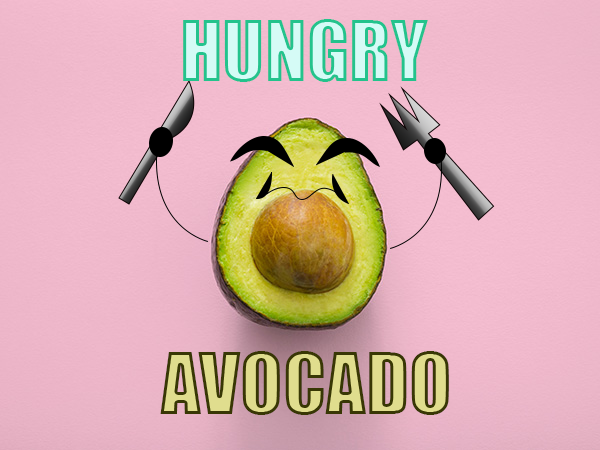
<style>
.page{position:relative;width:600px;height:450px}
.page>*{position:absolute;margin:0}
.t1{font:77.3px "Impact"}
.t2{font:78.1px "Impact"}
</style>
<div class="page">
<p class="t1" style="left:183px;top:19px;width:245px;height:63px">HUNGRY</p>
<p class="t2" style="left:160px;top:351px;width:289px;height:64px">AVOCADO</p>
</div>
